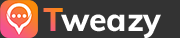
<style>
.page{position:relative;width:180px;height:38px;background:#333333}
.page>*{position:absolute;margin:0}
.t1{font:32px "Muli-ExtraBold";color:#ffffff}
</style>
<div class="page">
<p class="t1" style="left:61px;top:14px;width:100px;height:25px">weazy</p>
</div>
